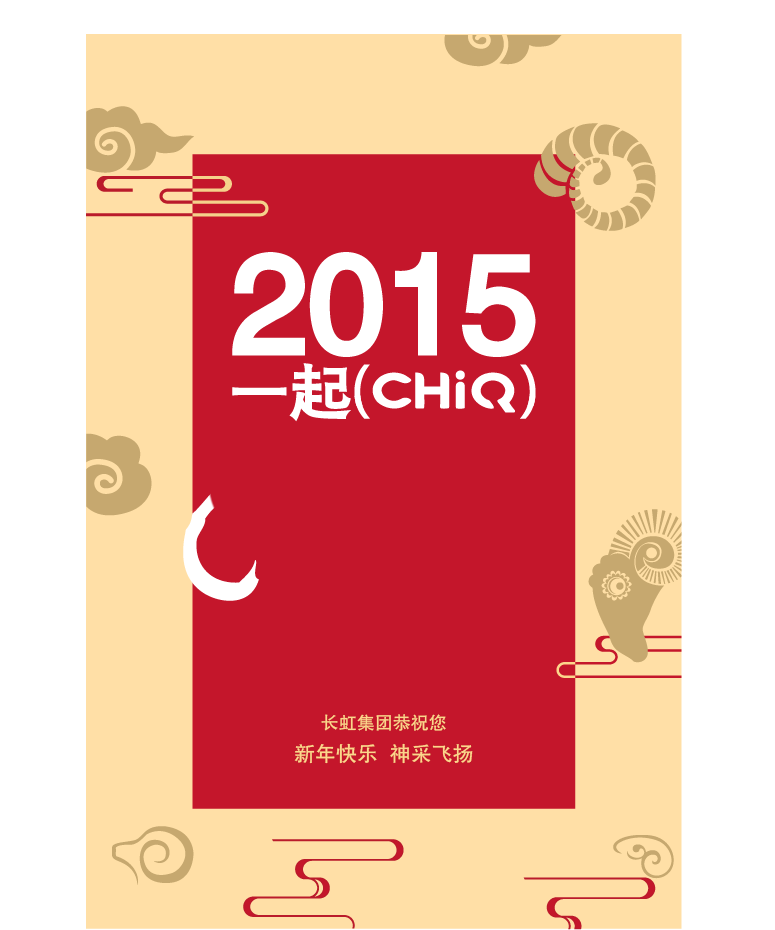
<style>
.page{position:relative;width:775px;height:930px;background:#ffdfa6}
.page>*{position:absolute;margin:0}
.t1{font:21px/31.2px "FZHTJW--GB1-0";color:#fcd68c}
.t2{font:18px/31.2px "FZHTJW--GB1-0";color:#fcd68c}
</style>
<div class="page">
<p class="t1" style="left:294px;top:714px;width:179px;height:50px;text-align:center"><span class="t2">长虹集团恭祝您<br></span>新年快乐  神采飞扬</p>
</div>
